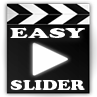
<style>
.page{position:relative;width:97px;height:97px}
.page>*{position:absolute;margin:0}
.t1{font:14px "CooperBlackStd";color:#ffffff;scale:1.73 1}
.t2{font:14px "CooperBlackStd";color:#ffffff;scale:1.28 1}
</style>
<div class="page">
<p class="t1" style="left:10px;top:27px;width:75px;height:11px">EASY</p>
<p class="t2" style="left:10px;top:79px;width:75px;height:11px">SLIDER</p>
</div>
